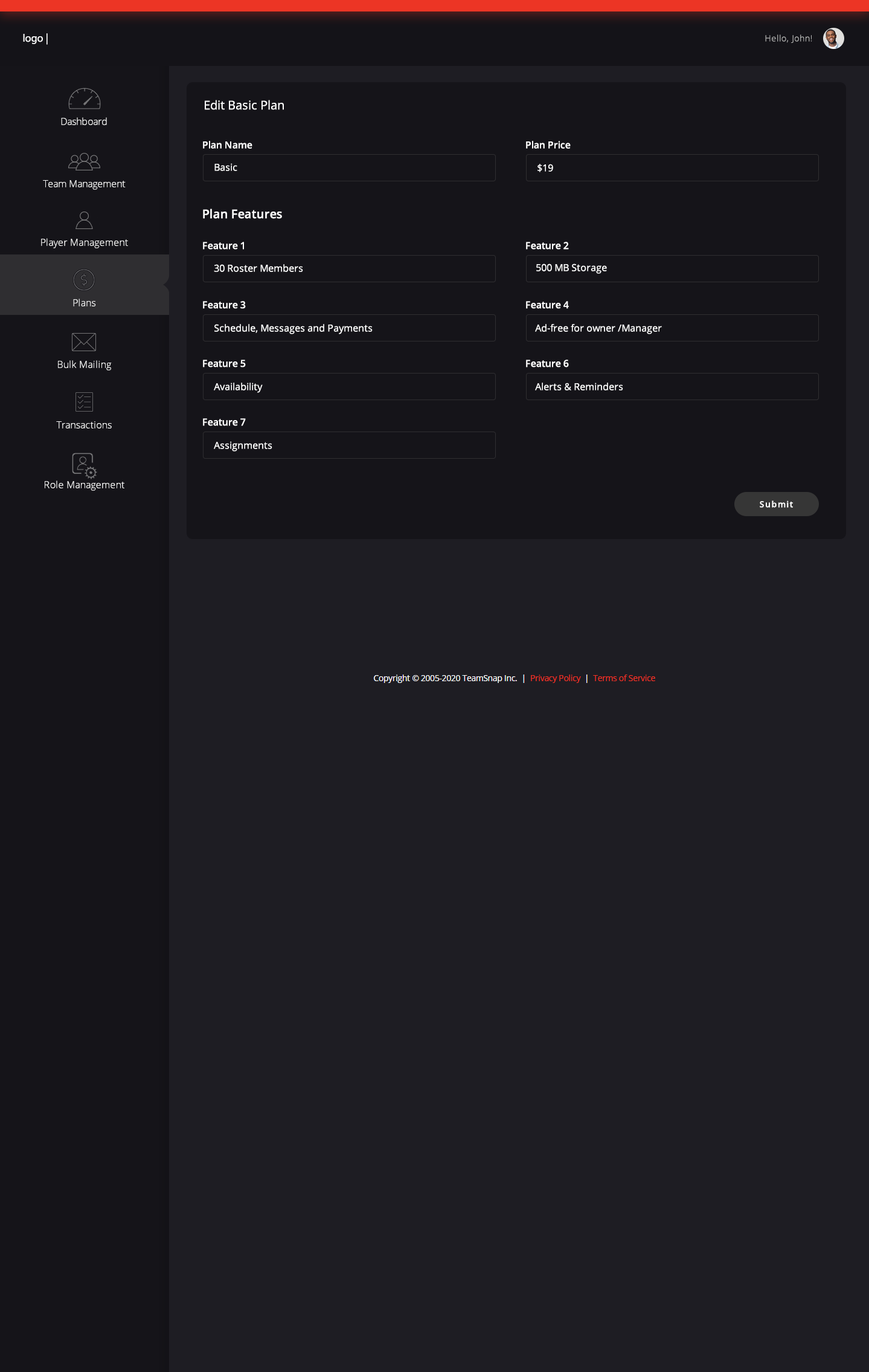
<style>
.page{position:relative;width:869px;height:1372px;background:#1e1d23}
.page>*{position:absolute;margin:0}
.t1{font:10.9px "MyriadPro-Regular";color:#ffffff}
.t2{font:8.5px "OpenSans-Light";letter-spacing:0.06em;color:#bbbbbb}
.t3{font:12.1px "OpenSans";color:#ffffff}
.t4{font:9.7px "OpenSans-Light";color:#f6f6f6}
.t5{font:9.7px "OpenSans-Semibold";color:#ffffff}
.t6{font:9.7px "OpenSans";color:#ffffff}
.t7{font:12.1px "OpenSans-Semibold";color:#ffffff}
.t8{font:9.7px "OpenSans-Light";letter-spacing:0.02em;color:#f6f6f6}
.t9{font:8.5px "OpenSans-Semibold";letter-spacing:0.1em;color:#ffffff}
</style>
<div class="page">
<p class="t1" style="left:23px;top:33px;width:25px;height:12px">logo |</p>
<p class="t2" style="left:766px;top:34px;width:47px;height:9px">Hello, John!</p>
<p class="t3" style="left:205px;top:100px;width:79px;height:10px">Edit Basic Plan</p>
<p class="t4" style="left:61px;top:117px;width:46px;height:8px">Dashboard</p>
<p class="t5" style="left:203px;top:141px;width:50px;height:8px">Plan Name</p>
<p class="t5" style="left:526px;top:141px;width:45px;height:8px">Plan Price</p>
<p class="t6" style="left:214px;top:163px;width:23px;height:8px">Basic</p>
<p class="t6" style="left:538px;top:164px;width:15px;height:8px">$19</p>
<p class="t4" style="left:43px;top:180px;width:83px;height:10px">Team Management</p>
<p class="t7" style="left:203px;top:208px;width:79px;height:11px">Plan Features</p>
<p class="t8" style="left:41px;top:238px;width:87px;height:10px">Player Management</p>
<p class="t5" style="left:203px;top:242px;width:41px;height:8px">Feature 1</p>
<p class="t5" style="left:526px;top:242px;width:43px;height:8px">Feature 2</p>
<p class="t6" style="left:214px;top:264px;width:89px;height:8px">30 Roster Members</p>
<p class="t6" style="left:537px;top:263px;width:70px;height:11px">500 MB Storage</p>
<p class="t8" style="left:73px;top:298px;width:23px;height:8px">Plans</p>
<p class="t5" style="left:203px;top:301px;width:43px;height:8px">Feature 3</p>
<p class="t5" style="left:526px;top:301px;width:43px;height:8px">Feature 4</p>
<p class="t6" style="left:214px;top:324px;width:159px;height:10px">Schedule, Messages and Payments</p>
<p class="t6" style="left:535px;top:324px;width:127px;height:10px">Ad-free for owner /Manager</p>
<p class="t8" style="left:58px;top:360px;width:54px;height:10px">Bulk Mailing</p>
<p class="t5" style="left:203px;top:359px;width:43px;height:8px">Feature 5</p>
<p class="t5" style="left:526px;top:359px;width:43px;height:8px">Feature 6</p>
<p class="t6" style="left:214px;top:382px;width:49px;height:11px">Availability</p>
<p class="t6" style="left:535px;top:382px;width:89px;height:8px">Alerts &amp; Reminders</p>
<p class="t8" style="left:56px;top:421px;width:56px;height:7px">Transactions</p>
<p class="t5" style="left:203px;top:418px;width:43px;height:8px">Feature 7</p>
<p class="t6" style="left:214px;top:441px;width:58px;height:10px">Assignments</p>
<p class="t8" style="left:45px;top:480px;width:79px;height:11px">Role Management</p>
<p class="t9" style="left:760px;top:500px;width:33px;height:8px">Submit</p>
</div>
